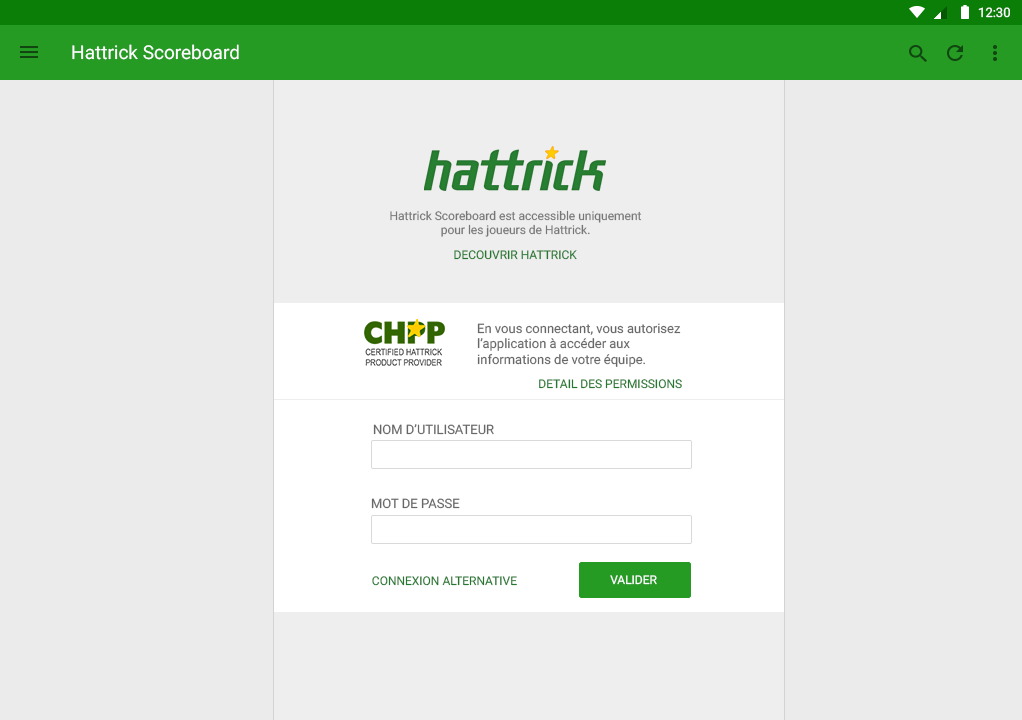
<style>
.page{position:relative;width:1022px;height:720px;background:#ebebeb}
.page>*{position:absolute;margin:0}
.t1{font:13px "Roboto-Regular";color:#ffffff}
.t2{font:19px "Roboto-Regular";color:#ffffff}
.t3{font:12px "Roboto-Regular";color:#777777}
.t4{font:12px "Roboto-Regular";color:#24782d}
.t5{font:13px "Roboto-Regular";color:#676767}
.t6{font:12px "Roboto-Regular";color:#ffffff}
</style>
<div class="page">
<p class="t1" style="left:978px;top:7px;width:32px;height:11px">12:30</p>
<p class="t2" style="left:72px;top:44px;width:167px;height:16px">Hattrick Scoreboard</p>
<p class="t3" style="left:390px;top:210px;width:252px;height:27px;text-align:center">Hattrick Scoreboard est accessible uniquement<br>pour les joueurs de Hattrick.</p>
<p class="t4" style="left:454px;top:250px;width:123px;height:10px">DECOUVRIR HATTRICK</p>
<p class="t5" style="left:477px;top:323px;width:204px;height:44px">En vous connectant, vous autorisez l’application à accéder aux <br>informations de votre équipe.</p>
<p class="t4" style="left:539px;top:379px;width:143px;height:10px">DETAIL DES PERMISSIONS</p>
<p class="t5" style="left:373px;top:424px;width:121px;height:11px">NOM D’UTILISATEUR</p>
<p class="t5" style="left:371px;top:498px;width:89px;height:11px">MOT DE PASSE</p>
<p class="t4" style="left:372px;top:576px;width:145px;height:10px">CONNEXION ALTERNATIVE</p>
<p class="t6" style="left:610px;top:575px;width:47px;height:10px">VALIDER</p>
</div>
